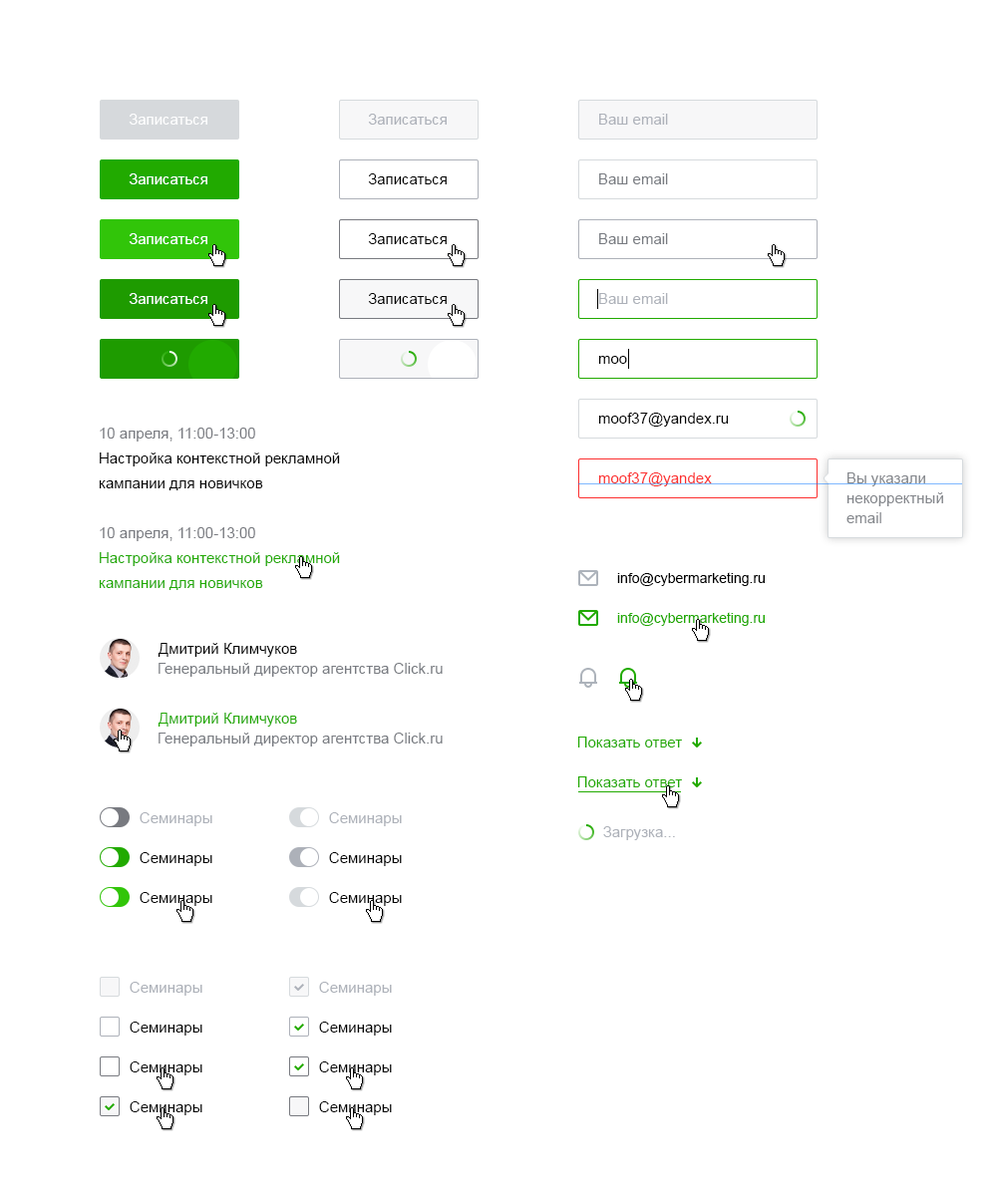
<style>
.page{position:relative;width:997px;height:1196px;background:#ffffff}
.page>*{position:absolute;margin:0}
.t1{font:15px "ArialMT";color:#ffffff}
.t2{font:15px "ArialMT";color:#adb1b9}
.t3{font:15px "ArialMT";color:#000000}
.t4{font:15px "ArialMT";color:#787b81}
.t5{font:15px "ArialMT";color:#787a80}
.t6{font:15px/24.9px "ArialMT";color:#000000}
.t7{font:15px "ArialMT";color:#fc2f2f}
.t8{font:15px/19.9px "ArialMT";color:#83868b}
.t9{font:15px/24.9px "ArialMT";color:#21aa00}
.t10{font:14px "ArialMT";color:#000000}
.t11{font:14px "ArialMT";color:#21aa00}
.t12{font:15px "ArialMT";color:#21aa00}
</style>
<div class="page">
<p class="t1" style="left:129px;top:114px;width:78px;height:11px">Записаться</p>
<p class="t2" style="left:368px;top:114px;width:79px;height:11px">Записаться</p>
<p class="t2" style="left:599px;top:114px;width:69px;height:11px">Ваш email</p>
<p class="t1" style="left:129px;top:173px;width:78px;height:11px">Записаться</p>
<p class="t3" style="left:368px;top:173px;width:79px;height:11px">Записаться</p>
<p class="t4" style="left:599px;top:173px;width:69px;height:11px">Ваш email</p>
<p class="t1" style="left:129px;top:233px;width:78px;height:11px">Записаться</p>
<p class="t3" style="left:368px;top:233px;width:79px;height:11px">Записаться</p>
<p class="t4" style="left:599px;top:233px;width:69px;height:11px">Ваш email</p>
<p class="t1" style="left:129px;top:293px;width:78px;height:11px">Записаться</p>
<p class="t3" style="left:368px;top:293px;width:79px;height:11px">Записаться</p>
<p class="t2" style="left:599px;top:293px;width:69px;height:11px">Ваш email</p>
<p class="t3" style="left:598px;top:356px;width:29px;height:8px">moo</p>
<p class="t3" style="left:598px;top:413px;width:131px;height:14px">moof37@yandex.ru</p>
<p class="t5" style="left:100px;top:428px;width:155px;height:14px">10 апреля, 11:00-13:00</p>
<p class="t6" style="left:99px;top:453px;width:241px;height:37px">Настройка контекстной рекламной <br>кампании для новичков</p>
<p class="t7" style="left:598px;top:473px;width:114px;height:13px">moof37@yandex</p>
<p class="t8" style="left:846px;top:473px;width:97px;height:50px">Вы указали<br>некорректный<br>email</p>
<p class="t5" style="left:100px;top:527px;width:155px;height:14px">10 апреля, 11:00-13:00</p>
<p class="t9" style="left:99px;top:552px;width:241px;height:38px">Настройка контекстной рекламной <br>кампании для новичков</p>
<p class="t10" style="left:617px;top:572px;width:148px;height:14px">info@cybermarketing.ru</p>
<p class="t11" style="left:617px;top:612px;width:148px;height:14px">info@cybermarketing.ru</p>
<p class="t3" style="left:158px;top:643px;width:139px;height:14px">Дмитрий Климчуков</p>
<p class="t4" style="left:158px;top:663px;width:285px;height:14px">Генеральный директор агентства Click.ru</p>
<p class="t12" style="left:158px;top:713px;width:139px;height:14px">Дмитрий Климчуков</p>
<p class="t4" style="left:158px;top:733px;width:285px;height:14px">Генеральный директор агентства Click.ru</p>
<p class="t12" style="left:577px;top:737px;width:105px;height:11px">Показать ответ</p>
<p class="t12" style="left:577px;top:777px;width:105px;height:11px">Показать ответ</p>
<p class="t2" style="left:140px;top:812px;width:72px;height:14px">Семинары</p>
<p class="t2" style="left:329px;top:812px;width:73px;height:14px">Семинары</p>
<p class="t2" style="left:603px;top:826px;width:72px;height:14px">Загрузка...</p>
<p class="t3" style="left:140px;top:852px;width:72px;height:14px">Семинары</p>
<p class="t3" style="left:329px;top:852px;width:73px;height:14px">Семинары</p>
<p class="t3" style="left:140px;top:892px;width:72px;height:14px">Семинары</p>
<p class="t3" style="left:329px;top:892px;width:73px;height:14px">Семинары</p>
<p class="t2" style="left:130px;top:982px;width:72px;height:14px">Семинары</p>
<p class="t2" style="left:319px;top:982px;width:73px;height:14px">Семинары</p>
<p class="t3" style="left:130px;top:1022px;width:72px;height:14px">Семинары</p>
<p class="t3" style="left:319px;top:1022px;width:73px;height:14px">Семинары</p>
<p class="t3" style="left:130px;top:1062px;width:72px;height:14px">Семинары</p>
<p class="t3" style="left:319px;top:1062px;width:73px;height:14px">Семинары</p>
<p class="t3" style="left:130px;top:1102px;width:72px;height:13px">Семинары</p>
<p class="t3" style="left:319px;top:1102px;width:73px;height:13px">Семинары</p>
</div>
